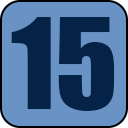
<style>
.page{position:relative;width:128px;height:128px;background:#6893c4}
.page>*{position:absolute;margin:0}
.t1{font:117px "Impact";color:#042346}
</style>
<div class="page">
<p class="t1" style="left:11px;top:17px;width:104px;height:94px">15</p>
</div>
